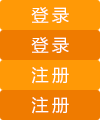
<style>
.page{position:relative;width:100px;height:120px;background:#ff9906}
.page>*{position:absolute;margin:0}
.t1{font:17px "MicrosoftYaHei";letter-spacing:0.2em;color:#ffffff}
</style>
<div class="page">
<p class="t1" style="left:31px;top:7px;width:38px;height:16px">登录</p>
<p class="t1" style="left:31px;top:37px;width:38px;height:16px">登录</p>
<p class="t1" style="left:31px;top:66px;width:38px;height:18px">注册</p>
<p class="t1" style="left:31px;top:96px;width:38px;height:18px">注册</p>
</div>
